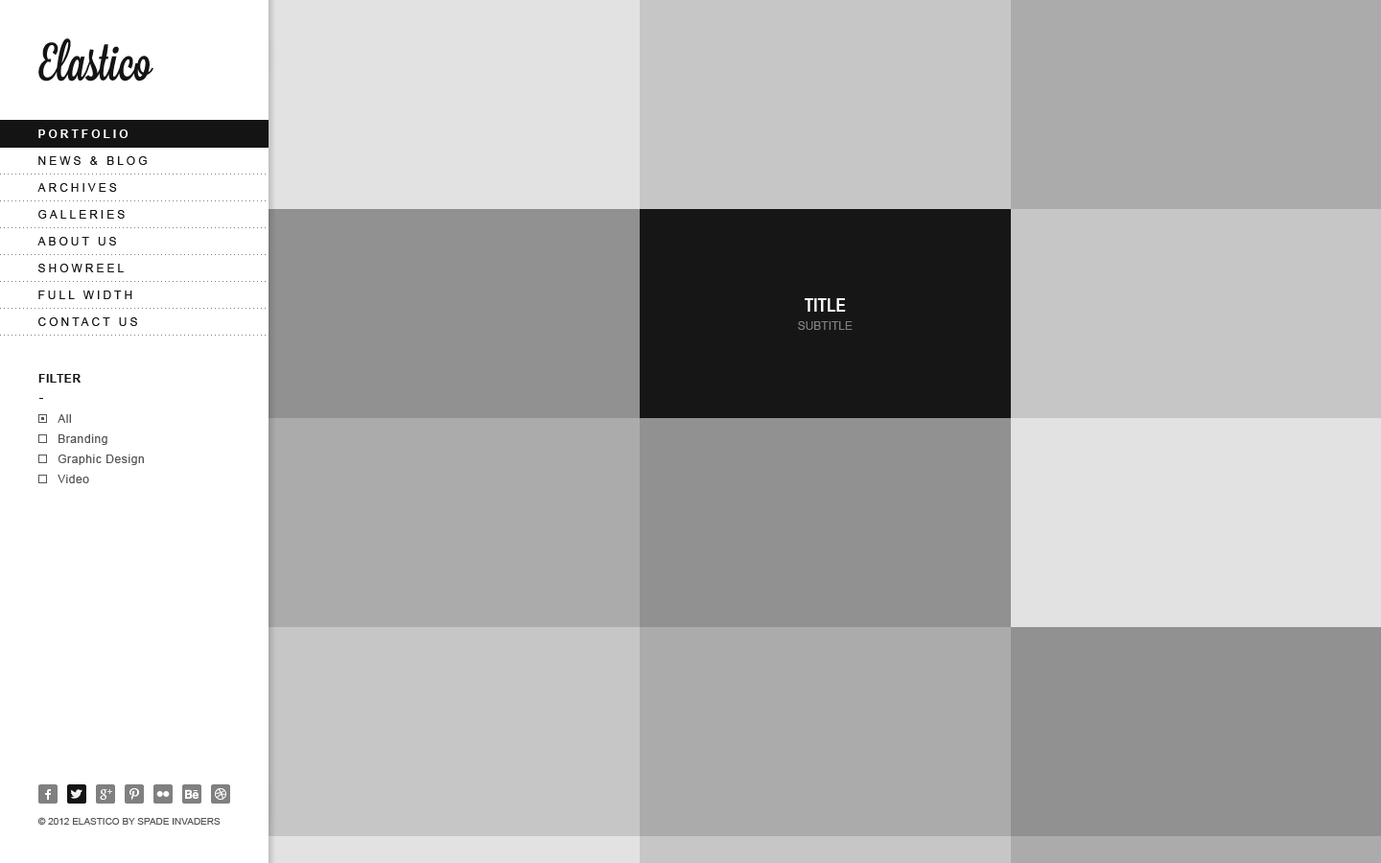
<style>
.page{position:relative;width:1381px;height:863px}
.page>*{position:absolute;margin:0}
.t1{font:11.5px "Arial-BoldMT";letter-spacing:0.25em;color:#ffffff;text-transform:uppercase}
.t2{font:11.5px "ArialMT";letter-spacing:0.25em;color:#141414;text-transform:uppercase}
.t3{font:11.5px/18.2px "ArialMT";color:#808080;text-transform:uppercase}
.t4{font:18.2px/18.2px "ArialNarrow-Bold";color:#ffffff;text-transform:uppercase}
.t5{font:11.5px "Arial-BoldMT";letter-spacing:0.05em;color:#141414;text-transform:uppercase}
.t6{font:11.5px "ArialMT";letter-spacing:0.05em;color:#555555}
.t7{font:9.6px "ArialMT";color:#555555;text-transform:uppercase}
</style>
<div class="page">
<p class="t1" style="left:38px;top:129px;width:91px;height:9px">portfolio</p>
<p class="t2" style="left:38px;top:156px;width:109px;height:9px">news &amp; blog</p>
<p class="t2" style="left:37px;top:183px;width:80px;height:9px">archives</p>
<p class="t2" style="left:38px;top:210px;width:87px;height:9px">galleries</p>
<p class="t2" style="left:37px;top:237px;width:79px;height:9px">about us</p>
<p class="t2" style="left:38px;top:264px;width:86px;height:8px">showreel</p>
<p class="t2" style="left:38px;top:291px;width:94px;height:8px">full width</p>
<p class="t3" style="left:798px;top:298px;width:55px;height:32px;text-align:center"><span class="t4">title<br></span>subtitle</p>
<p class="t2" style="left:38px;top:317px;width:99px;height:9px">contact us</p>
<p class="t5" style="left:38px;top:374px;width:43px;height:9px">filter</p>
<p class="t6" style="left:58px;top:414px;width:13px;height:9px">All</p>
<p class="t6" style="left:59px;top:435px;width:48px;height:10px">Branding</p>
<p class="t6" style="left:58px;top:455px;width:86px;height:10px">Graphic Design</p>
<p class="t6" style="left:58px;top:475px;width:31px;height:8px">Video</p>
<p class="t7" style="left:37px;top:817px;width:184px;height:9px">© 2012 elastico by spade invaders</p>
</div>
